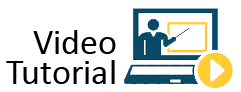
<style>
.page{position:relative;width:241px;height:92px;background:#ffffff}
.page>*{position:absolute;margin:0}
.t1{font:36px/30px "Calibri";color:#000000}
</style>
<div class="page">
<p class="t1" style="left:6px;top:30px;width:110px;height:54px;text-align:right">Video<br>Tutorial</p>
</div>
